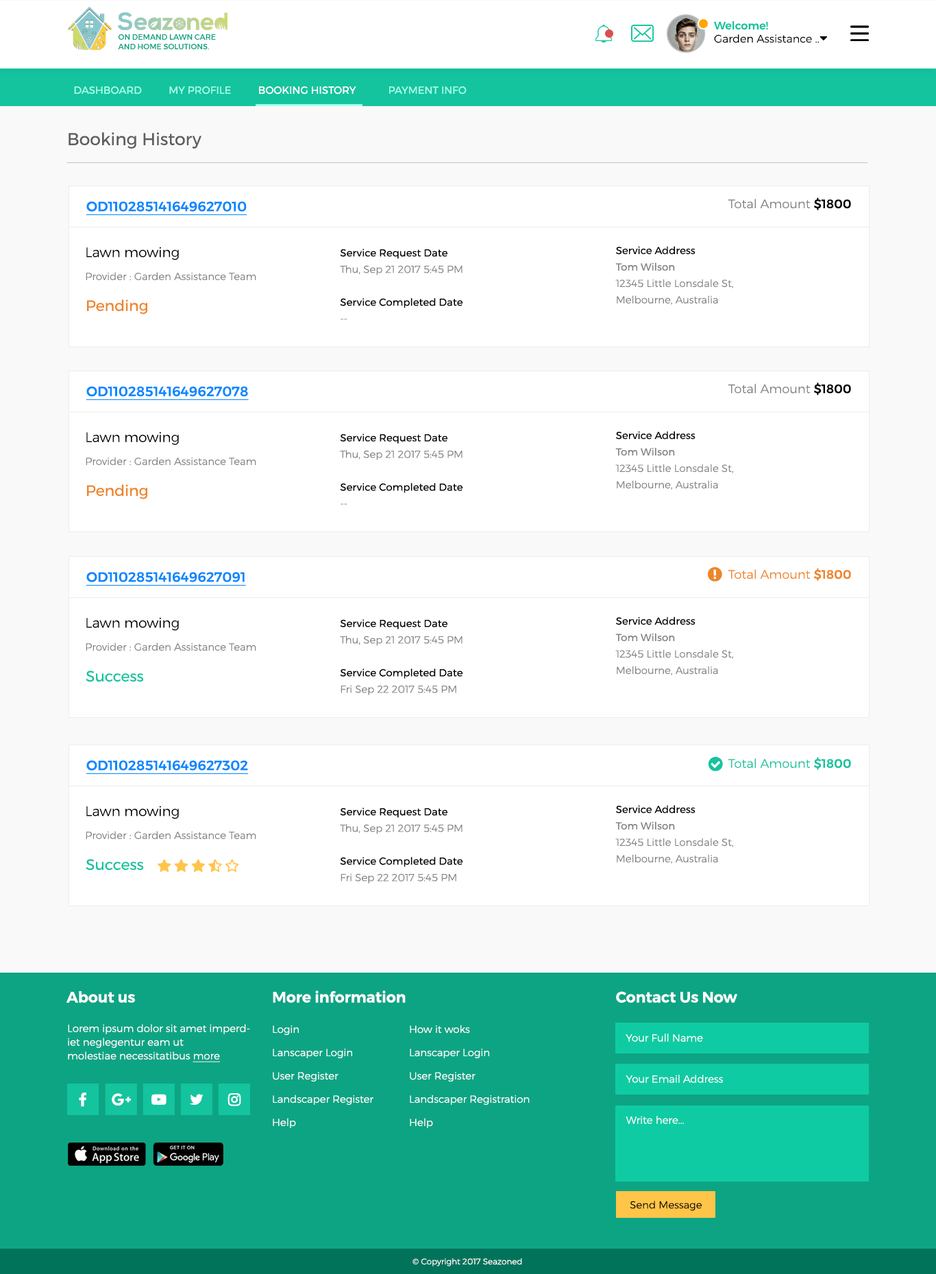
<style>
.page{position:relative;width:936px;height:1274px;background:#ffffff}
.page>*{position:absolute;margin:0}
.t1{font:11px "Montserrat-Light";color:#000000}
.t2{font:11px "Montserrat-Medium";color:#13c49e}
.t3{font:7.5px "Montserrat-Medium";color:#0da484;text-transform:uppercase}
.t4{font:10.3px "Montserrat-Regular";color:#a6feeb;text-transform:uppercase}
.t5{font:10.3px "Montserrat-Regular";color:#ffffff;text-transform:uppercase}
.t6{font:17.1px "Montserrat-Regular";color:#5e5e5e}
.t7{font:12.3px "Montserrat-Light";color:#838383}
.t8{font:12.3px "Montserrat-Medium";color:#000000}
.t9{font:13.7px "Montserrat-Medium";color:#0687ff;text-decoration:underline}
.t10{font:10.3px/16.4px "Montserrat-Light";color:#838383}
.t11{font:10.3px/16.4px "Montserrat-Regular";color:#000000}
.t12{font:10.3px/16.4px "Montserrat-Regular";color:#828282}
.t13{font:13.7px "Montserrat-Light";color:#000000}
.t14{font:10.3px "Montserrat-Light";color:#838383}
.t15{font:15.1px "Montserrat-Regular";color:#ee8528}
.t16{font:12.3px "Montserrat-Light";color:#ee8528}
.t17{font:12.3px "Montserrat-Medium";color:#ee8528}
.t18{font:15.1px "Montserrat-Regular";color:#14c49e}
.t19{font:12.3px "Montserrat-Light";color:#14c49e}
.t20{font:12.3px "Montserrat-Medium";color:#14c49e}
.t21{font:15.1px "Montserrat-SemiBold";color:#ffffff}
.t22{font:10.3px/13.7px "Montserrat-Light";color:#ffffff}
.t23{font:10.3px/13.7px "Montserrat-Light";color:#ffffff;text-decoration:underline}
.t24{font:10.3px/23.3px "Montserrat-Light";color:#ffffff}
.t25{font:10.3px "Montserrat-Light";color:#ffffff}
.t26{font:10.3px "Montserrat-Light";color:#000000}
.t27{font:8.2px "Montserrat-Light";color:#ffffff}
</style>
<div class="page">
<p class="t1" style="left:714px;top:21px;width:105px;height:22px"><span class="t2">Welcome! <br></span>Garden Assistance ..</p>
<p class="t3" style="left:118px;top:34px;width:98px;height:15px">on demand lawn care <br>and home solutions.</p>
<p class="t4" style="left:74px;top:86px;width:393px;height:9px">DASHBOARD          MY PROFILE         <span class="t5"> booking history</span>            payment info</p>
<p class="t6" style="left:69px;top:132px;width:132px;height:17px">Booking History</p>
<p class="t7" style="left:728px;top:197px;width:123px;height:13px">Total Amount <span class="t8">$1800</span></p>
<p class="t9" style="left:86px;top:201px;width:161px;height:14px">OD110285141649627010</p>
<p class="t10" style="left:615px;top:246px;width:118px;height:59px"><span class="t11">Service Address<br></span><span class="t12">Tom Wilson <br></span>12345 Little Lonsdale St, <br>Melbourne, Australia</p>
<p class="t13" style="left:86px;top:247px;width:93px;height:13px">Lawn mowing</p>
<p class="t10" style="left:340px;top:249px;width:122px;height:71px"><span class="t11">Service Request Date<br></span>Thu, Sep 21 2017 5:45 PM<br><br><span class="t11">Service Completed Date<br></span>--</p>
<p class="t14" style="left:86px;top:272px;width:170px;height:8px">Provider : Garden Assistance Team</p>
<p class="t15" style="left:87px;top:299px;width:60px;height:15px">Pending</p>
<p class="t9" style="left:86px;top:386px;width:163px;height:14px">OD110285141649627078</p>
<p class="t7" style="left:728px;top:382px;width:123px;height:13px">Total Amount <span class="t8">$1800</span></p>
<p class="t13" style="left:86px;top:432px;width:93px;height:13px">Lawn mowing</p>
<p class="t10" style="left:340px;top:434px;width:122px;height:71px"><span class="t11">Service Request Date<br></span>Thu, Sep 21 2017 5:45 PM<br><br><span class="t11">Service Completed Date<br></span>--</p>
<p class="t10" style="left:615px;top:431px;width:118px;height:59px"><span class="t11">Service Address<br></span><span class="t12">Tom Wilson <br></span>12345 Little Lonsdale St, <br>Melbourne, Australia</p>
<p class="t14" style="left:86px;top:457px;width:170px;height:8px">Provider : Garden Assistance Team</p>
<p class="t15" style="left:87px;top:484px;width:60px;height:15px">Pending</p>
<p class="t16" style="left:728px;top:568px;width:123px;height:13px">Total Amount <span class="t17">$1800</span></p>
<p class="t9" style="left:86px;top:572px;width:160px;height:14px">OD110285141649627091</p>
<p class="t13" style="left:86px;top:617px;width:93px;height:14px">Lawn mowing</p>
<p class="t10" style="left:615px;top:617px;width:118px;height:58px"><span class="t11">Service Address<br></span><span class="t12">Tom Wilson <br></span>12345 Little Lonsdale St, <br>Melbourne, Australia</p>
<p class="t10" style="left:340px;top:619px;width:122px;height:76px"><span class="t11">Service Request Date<br></span>Thu, Sep 21 2017 5:45 PM<br><br><span class="t11">Service Completed Date<br></span>Fri Sep 22 2017 5:45 PM</p>
<p class="t14" style="left:86px;top:643px;width:170px;height:8px">Provider : Garden Assistance Team</p>
<p class="t18" style="left:86px;top:671px;width:58px;height:11px">Success</p>
<p class="t9" style="left:86px;top:760px;width:163px;height:14px">OD110285141649627302</p>
<p class="t19" style="left:728px;top:757px;width:123px;height:13px">Total Amount <span class="t20">$1800</span></p>
<p class="t13" style="left:86px;top:806px;width:93px;height:13px">Lawn mowing</p>
<p class="t10" style="left:340px;top:808px;width:122px;height:76px"><span class="t11">Service Request Date<br></span>Thu, Sep 21 2017 5:45 PM<br><br><span class="t11">Service Completed Date<br></span>Fri Sep 22 2017 5:45 PM</p>
<p class="t10" style="left:615px;top:805px;width:118px;height:59px"><span class="t11">Service Address<br></span><span class="t12">Tom Wilson <br></span>12345 Little Lonsdale St, <br>Melbourne, Australia</p>
<p class="t14" style="left:86px;top:831px;width:170px;height:8px">Provider : Garden Assistance Team</p>
<p class="t18" style="left:86px;top:859px;width:58px;height:12px">Success</p>
<p class="t21" style="left:66px;top:991px;width:69px;height:12px">About us</p>
<p class="t21" style="left:273px;top:991px;width:133px;height:12px">More information</p>
<p class="t21" style="left:616px;top:991px;width:121px;height:12px">Contact Us Now</p>
<p class="t22" style="left:68px;top:1024px;width:182px;height:39px">Lorem ipsum dolor sit amet imperdiet neglegentur eam ut<br>molestiae necessitatibus <span class="t23">more</span></p>
<p class="t24" style="left:273px;top:1026px;width:100px;height:102px">Login<br>Lanscaper Login<br>User Register<br>Landscaper Register<br>Help</p>
<p class="t24" style="left:410px;top:1025px;width:120px;height:103px">How it woks<br>Lanscaper Login<br>User Register<br>Landscaper Registration<br>Help</p>
<p class="t25" style="left:625px;top:1034px;width:78px;height:8px">Your Full Name</p>
<p class="t25" style="left:625px;top:1075px;width:98px;height:8px">Your Email Address</p>
<p class="t25" style="left:625px;top:1116px;width:59px;height:8px">Write here...</p>
<p class="t26" style="left:630px;top:1201px;width:72px;height:10px">Send Message</p>
<p class="t27" style="left:412px;top:1258px;width:110px;height:9px">© Copyright 2017 Seazoned</p>
</div>
